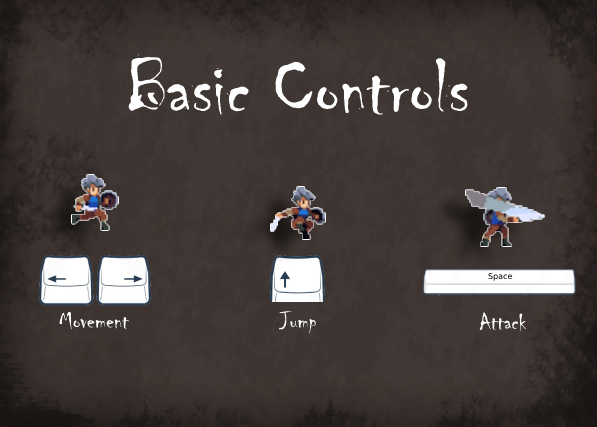
<style>
.page{position:relative;width:597px;height:427px}
.page>*{position:absolute;margin:0}
.t1{font:80px "Chiller-Regular";color:#ffffff}
.t2{font:8px "DejaVuSans"}
.t3{font:24px "Chiller-Regular";color:#ffffff}
</style>
<div class="page">
<p class="t1" style="left:128px;top:54px;width:340px;height:61px">Basic Controls</p>
<p class="t2" style="left:488px;top:273px;width:24px;height:8px">Space</p>
<p class="t3" style="left:59px;top:310px;width:71px;height:20px">Movement</p>
<p class="t3" style="left:279px;top:311px;width:37px;height:23px">Jump</p>
<p class="t3" style="left:479px;top:312px;width:48px;height:19px">Attack</p>
</div>
